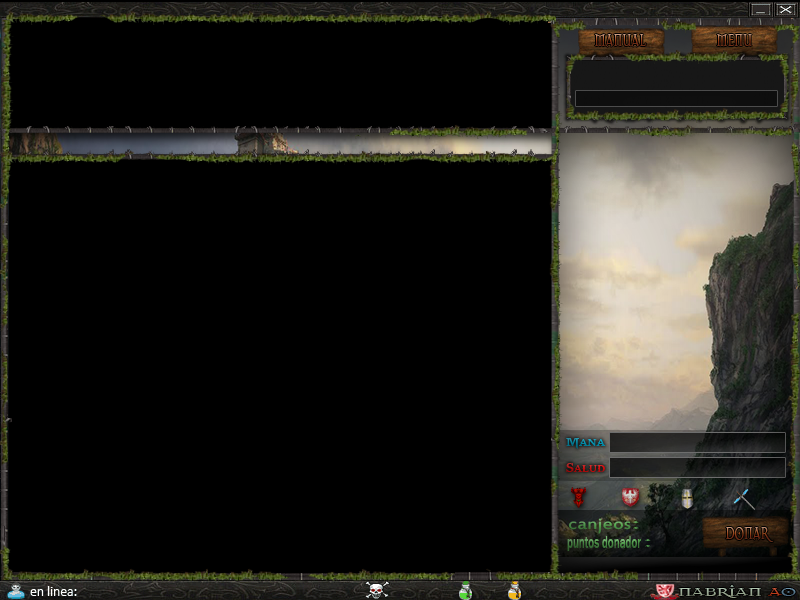
<style>
.page{position:relative;width:800px;height:600px;background:#000000}
.page>*{position:absolute;margin:0}
.t1{font:30.2px "Dark11";scale:0.6 1}
.t2{font:18.3px "EstrangeloEdessa";scale:1.15 1}
.t3{font:17.1px "Dark11";scale:2.11 1}
.t4{font:18.1px "FranklinGothic-Medium";scale:0.61 1}
.t5{font:18.9px "Dark11";scale:1.52 1}
</style>
<div class="page">
<p class="t1" style="left:594px;top:34px;width:53px;height:13px">manual</p>
<p class="t1" style="left:716px;top:34px;width:36px;height:12px">menu</p>
<p class="t2" style="left:568px;top:518px;width:63px;height:16px">canjeos</p>
<p class="t3" style="left:633px;top:521px;width:6px;height:8px">:</p>
<p class="t1" style="left:725px;top:527px;width:49px;height:15px">donar</p>
<p class="t4" style="left:567px;top:536px;width:74px;height:15px">puntos donador</p>
<p class="t3" style="left:645px;top:539px;width:6px;height:8px">:</p>
<p class="t5" style="left:678px;top:585px;width:118px;height:13px">nabrian ao</p>
</div>
